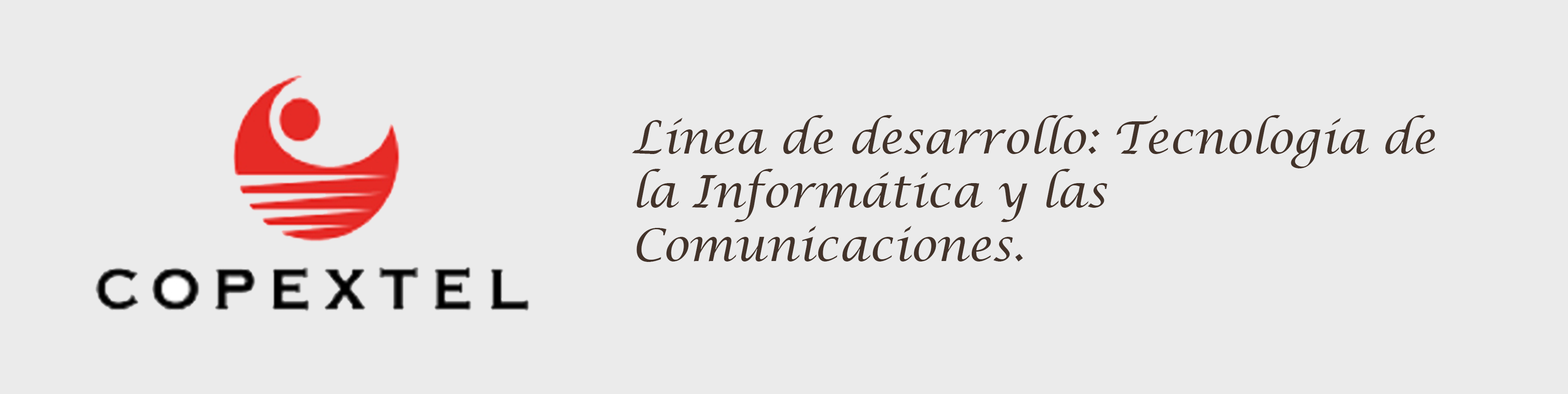
<style>
.page{position:relative;width:1568px;height:394px;background:#ebebeb}
.page>*{position:absolute;margin:0}
.t1{font:44.8px "LucidaCalligraphy-Italic";color:#43332a}
</style>
<div class="page">
<p class="t1" style="left:632px;top:115px;width:803px;height:147px">Línea de desarrollo: Tecnología de la Informática y las Comunicaciones.</p>
</div>
